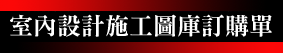
<style>
.page{position:relative;width:283px;height:53px;background:#000000}
.page>*{position:absolute;margin:0}
.t1{font:24px "DFNMing-XB-HK-BF";color:#ffffff}
</style>
<div class="page">
<p class="t1" style="left:10px;top:14px;width:262px;height:23px">室內設計施工圖庫訂購單</p>
</div>
